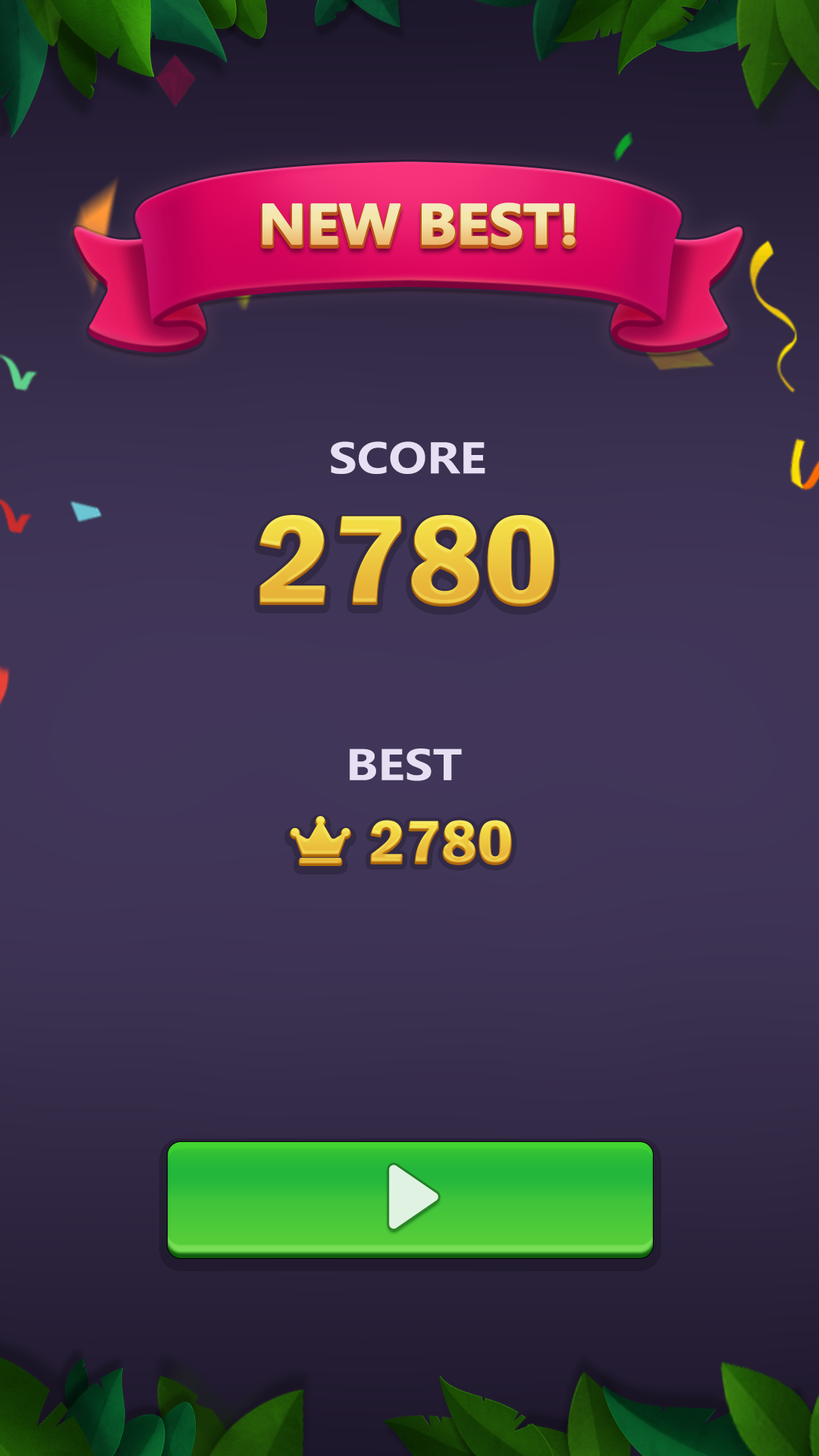
<style>
.page{position:relative;width:819px;height:1456px}
.page>*{position:absolute;margin:0}
.t1{font:52.3px "MicrosoftYaHei-Bold";letter-spacing:-0.025em;font-weight:bold;scale:1.09 1}
.t2{font:40.9px "MicrosoftYaHei-Bold";color:#e7dff3;text-transform:uppercase;scale:1.14 1}
.t3{font:129.3px "FranklinGothic-DemiCond";color:#efcd43;scale:1.14 1}
.t4{font:61.4px "FranklinGothic-DemiCond";scale:1.14 1}
</style>
<div class="page">
<p class="t1" style="left:262px;top:202px;width:314px;height:44px">NEW BEST!</p>
<p class="t2" style="left:331px;top:441px;width:154px;height:33px">Score</p>
<p class="t3" style="left:260px;top:515px;width:294px;height:89px">2780</p>
<p class="t2" style="left:350px;top:748px;width:112px;height:33px">Best</p>
<p class="t4" style="left:371px;top:820px;width:140px;height:43px">2780</p>
</div>
